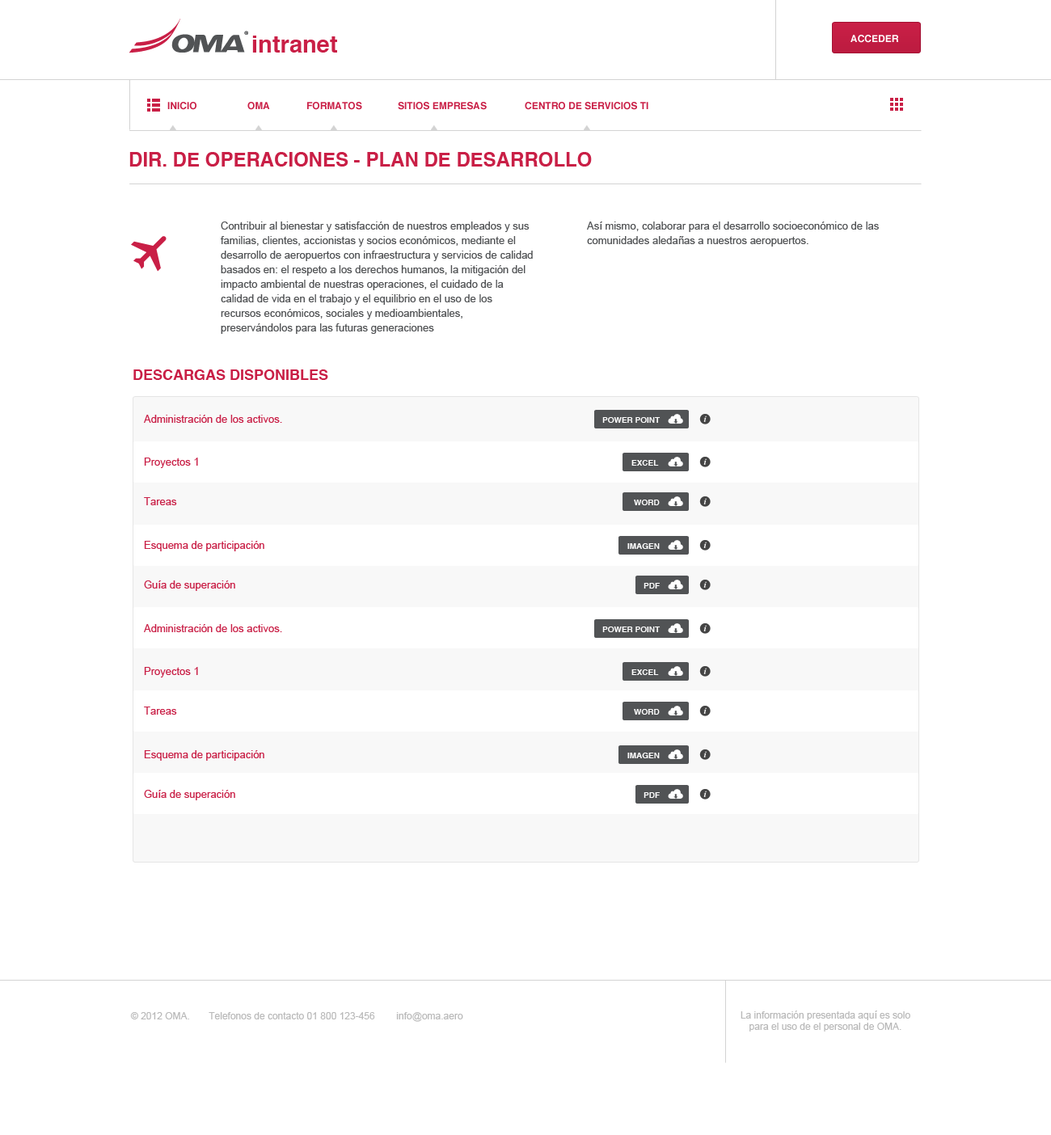
<style>
.page{position:relative;width:1051px;height:1135px;background:#ffffff}
.page>*{position:absolute;margin:0}
.t1{font:23.5px "Helvetica-Bold";color:#c91f46}
.t2{font:9.7px "Helvetica-Bold";color:#ffffff;text-transform:uppercase}
.t3{font:9.7px "Helvetica-Bold";color:#c91f46}
.t4{font:9.7px "Helvetica-Bold";color:#c91f46;text-transform:uppercase}
.t5{font:19.4px "Helvetica-Bold";color:#c91f46;text-transform:uppercase}
.t6{font:10.5px/14.5px "ArialMT";color:#515355}
.t7{font:14.5px "Helvetica-Bold";color:#c91f46;text-transform:uppercase}
.t8{font:10.5px "ArialMT";color:#c91f46}
.t9{font:8.1px "Helvetica-Bold";color:#ffffff;text-transform:uppercase}
.t10{font:9.7px "ArialMT";color:#b9b9b9}
</style>
<div class="page">
<p class="t1" style="left:252px;top:36px;width:85px;height:17px">intranet</p>
<p class="t2" style="left:850px;top:35px;width:49px;height:8px">Acceder</p>
<p class="t3" style="left:167px;top:102px;width:29px;height:8px">INICIO</p>
<p class="t3" style="left:247px;top:102px;width:23px;height:8px">OMA</p>
<p class="t4" style="left:307px;top:102px;width:55px;height:8px">formatos</p>
<p class="t4" style="left:398px;top:102px;width:89px;height:8px">sitios empresas</p>
<p class="t4" style="left:525px;top:102px;width:123px;height:8px">centro de servicios ti</p>
<p class="t5" style="left:129px;top:152px;width:463px;height:15px">dir. de operaciones - plan de desarrollo</p>
<p class="t6" style="left:221px;top:221px;width:312px;height:113px">Contribuir al bienestar y satisfacción de nuestros empleados y sus familias, clientes, accionistas y socios económicos, mediante el desarrollo de aeropuertos con infraestructura y servicios de calidad basados en: el respeto a los derechos humanos, la mitigación del impacto ambiental de nuestras operaciones, el cuidado de la calidad de vida en el trabajo y el equilibrio en el uso de los recursos económicos, sociales y medioambientales, preservándolos para las futuras generaciones</p>
<p class="t6" style="left:587px;top:221px;width:292px;height:26px">Así mismo, colaborar para el desarrollo socioeconómico de las comunidades aledañas a nuestros aeropuertos.</p>
<p class="t7" style="left:133px;top:369px;width:195px;height:11px">Descargas disponibles</p>
<p class="t8" style="left:144px;top:415px;width:138px;height:8px">Administración de los activos.</p>
<p class="t9" style="left:602px;top:417px;width:58px;height:6px">Power point</p>
<p class="t8" style="left:144px;top:457px;width:54px;height:11px">Proyectos 1</p>
<p class="t9" style="left:631px;top:460px;width:28px;height:6px">excel</p>
<p class="t8" style="left:144px;top:497px;width:33px;height:8px">Tareas</p>
<p class="t9" style="left:634px;top:500px;width:26px;height:5px">word</p>
<p class="t8" style="left:144px;top:541px;width:120px;height:10px">Esquema de participación</p>
<p class="t9" style="left:627px;top:543px;width:33px;height:6px">Imagen</p>
<p class="t8" style="left:144px;top:580px;width:91px;height:11px">Guía de superación</p>
<p class="t9" style="left:643px;top:583px;width:17px;height:5px">PDF</p>
<p class="t8" style="left:144px;top:624px;width:138px;height:8px">Administración de los activos.</p>
<p class="t9" style="left:602px;top:626px;width:58px;height:6px">Power point</p>
<p class="t8" style="left:144px;top:667px;width:54px;height:10px">Proyectos 1</p>
<p class="t9" style="left:631px;top:669px;width:28px;height:6px">excel</p>
<p class="t8" style="left:144px;top:706px;width:33px;height:9px">Tareas</p>
<p class="t9" style="left:634px;top:709px;width:26px;height:6px">word</p>
<p class="t8" style="left:144px;top:750px;width:120px;height:11px">Esquema de participación</p>
<p class="t9" style="left:627px;top:753px;width:33px;height:5px">Imagen</p>
<p class="t8" style="left:144px;top:790px;width:91px;height:10px">Guía de superación</p>
<p class="t9" style="left:643px;top:792px;width:17px;height:6px">PDF</p>
<p class="t10" style="left:130px;top:1012px;width:333px;height:10px">© 2012 OMA.       Telefonos de contacto 01 800 123-456        info@oma.aero</p>
<p class="t10" style="left:740px;top:1010px;width:170px;height:21px;text-align:center">La información presentada aquí es solo<br>para el uso de el personal de OMA.</p>
</div>
